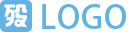
<style>
.page{position:relative;width:137px;height:32px;background:#ffffff}
.page>*{position:absolute;margin:0}
.t1{font:24.6px "hzgb";letter-spacing:0.025em;color:#ffffff}
.t2{font:32px "AdobeFanHeitiStd-Bold";letter-spacing:0.025em;color:#61b3e6}
</style>
<div class="page">
<p class="t1" style="left:4px;top:4px;width:23px;height:23px">殁</p>
<p class="t2" style="left:42px;top:4px;width:84px;height:25px">LOGO</p>
</div>
